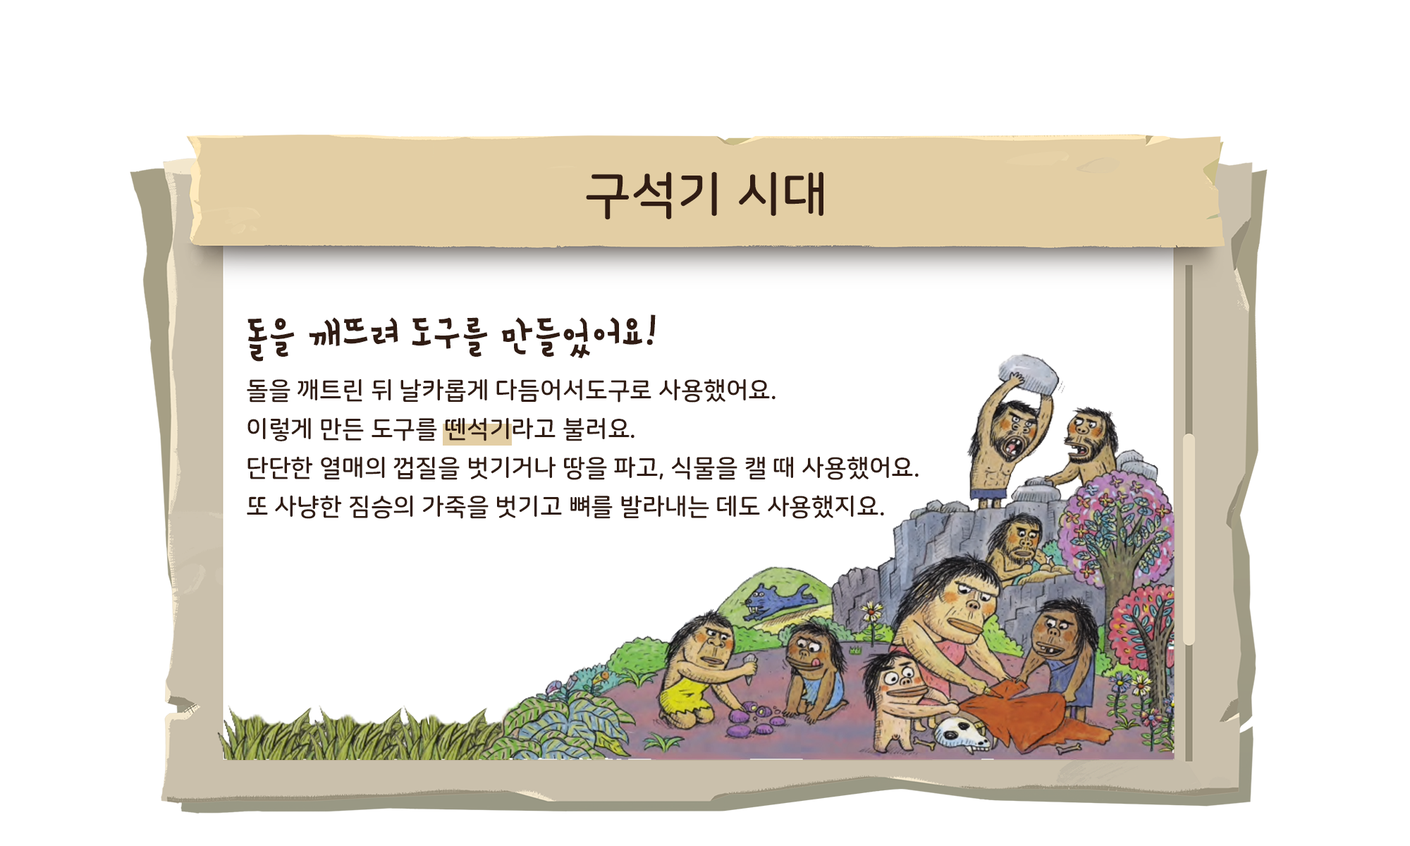
<style>
.page{position:relative;width:1410px;height:846px;background:#ffffff}
.page>*{position:absolute;margin:0}
.t1{font:50.8px "NanumSquareRoundOTFB";color:#301c13}
.t2{font:24.7px/38.8px "NanumSquareRoundOTFB";color:#301c13}
.t3{font:50.8px/64.8px "SDdBYeonpil-cBd";color:#301c13}
</style>
<div class="page">
<p class="t1" style="left:586px;top:172px;width:237px;height:48px">구석기 시대</p>
<p class="t2" style="left:247px;top:314px;width:671px;height:205px"><span class="t3">돌을 깨뜨려 도구를 만들었어요! <br></span>돌을 깨트린 뒤 날카롭게 다듬어서도구로 사용했어요.<br>이렇게 만든 도구를 뗀석기라고 불러요. <br>단단한 열매의 껍질을 벗기거나 땅을 파고, 식물을 캘 때 사용했어요.<br>또 사냥한 짐승의 가죽을 벗기고 뼈를 발라내는 데도 사용했지요.</p>
</div>
